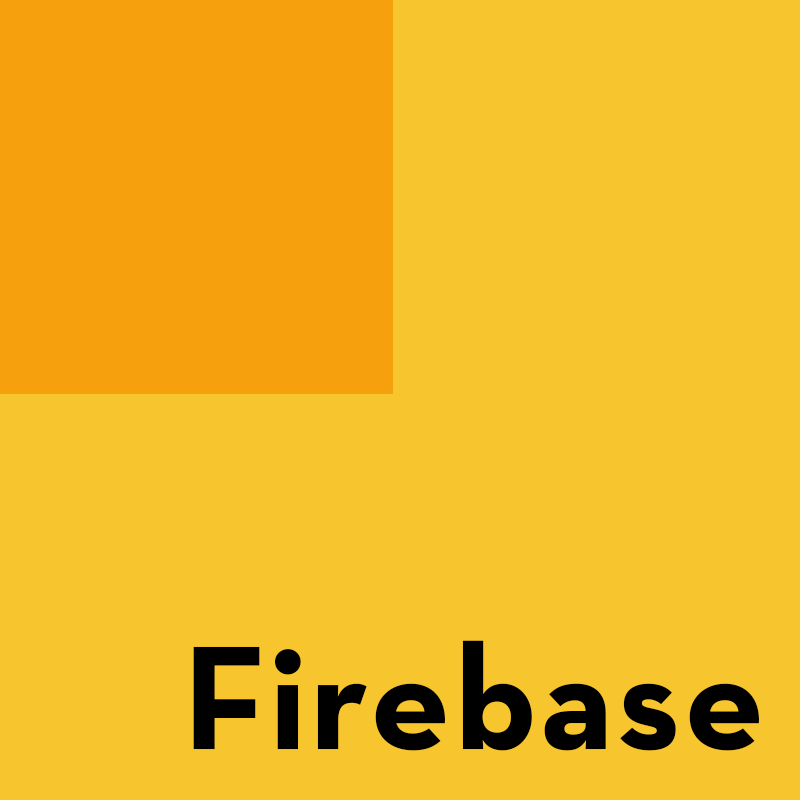
<style>
.page{position:relative;width:800px;height:800px;background:#f7c62e}
.page>*{position:absolute;margin:0}
.t1{font:150px "NeutraText-Bold";letter-spacing:0.025em;color:#000000}
</style>
<div class="page">
<p class="t1" style="left:193px;top:640px;width:566px;height:111px">Firebase</p>
</div>
